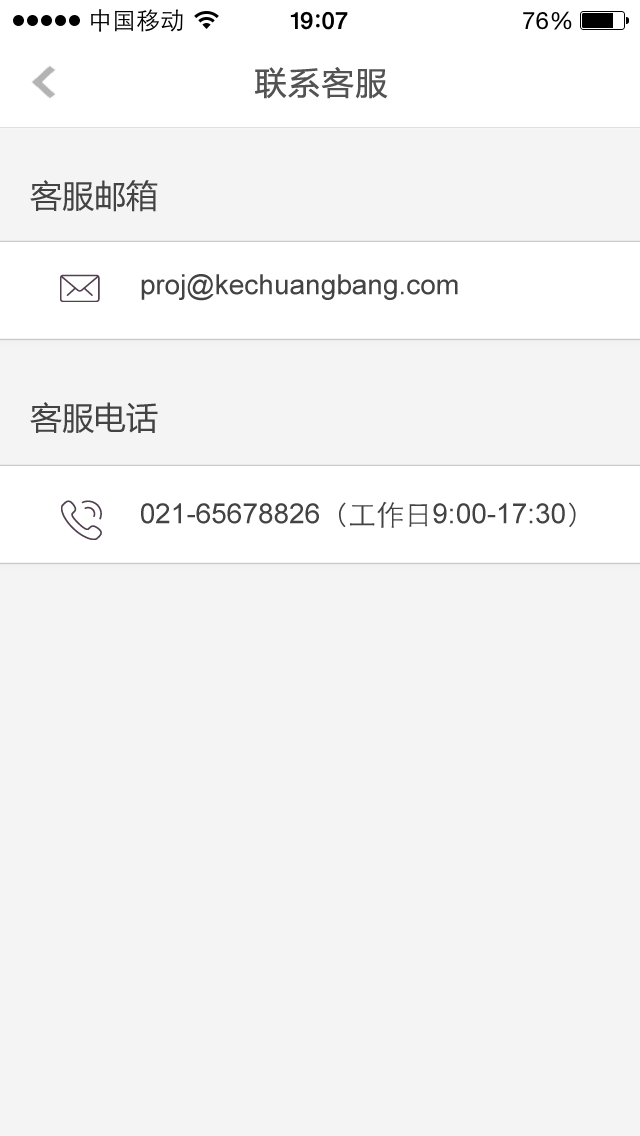
<style>
.page{position:relative;width:640px;height:1136px;background:#f4f4f4}
.page>*{position:absolute;margin:0}
.t1{font:32px "MicrosoftYaHei";letter-spacing:0.05em;color:#545353}
.t2{font:32px "MicrosoftYaHei";color:#434343}
.t3{font:28px "ArialMT";color:#434343}
.t4{font:28px "STXihei";color:#434343}
</style>
<div class="page">
<p class="t1" style="left:255px;top:67px;width:133px;height:32px">联系客服</p>
<p class="t2" style="left:30px;top:180px;width:128px;height:32px">客服邮箱</p>
<p class="t3" style="left:141px;top:274px;width:317px;height:27px">proj@kechuangbang.com</p>
<p class="t2" style="left:30px;top:402px;width:128px;height:31px">客服电话</p>
<p class="t3" style="left:141px;top:501px;width:435px;height:27px">021-65678826<span class="t4">（工作日</span>9:00-17:30<span class="t4">）</span></p>
</div>
